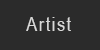
<style>
.page{position:relative;width:100px;height:50px;background:#2b2b2b}
.page>*{position:absolute;margin:0}
.t1{font:20px "ArialNarrow";letter-spacing:0.075em;color:#d9d9d8}
</style>
<div class="page">
<p class="t1" style="left:26px;top:17px;width:45px;height:14px">Artist</p>
</div>
